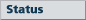
<style>
.page{position:relative;width:86px;height:20px;background:#d9dde0}
.page>*{position:absolute;margin:0}
.t1{font:11.4px "FrutigerBold";color:#103852;font-weight:bold;scale:1.05 1}
</style>
<div class="page">
<p class="t1" style="left:6px;top:5px;width:37px;height:9px">Status</p>
</div>
